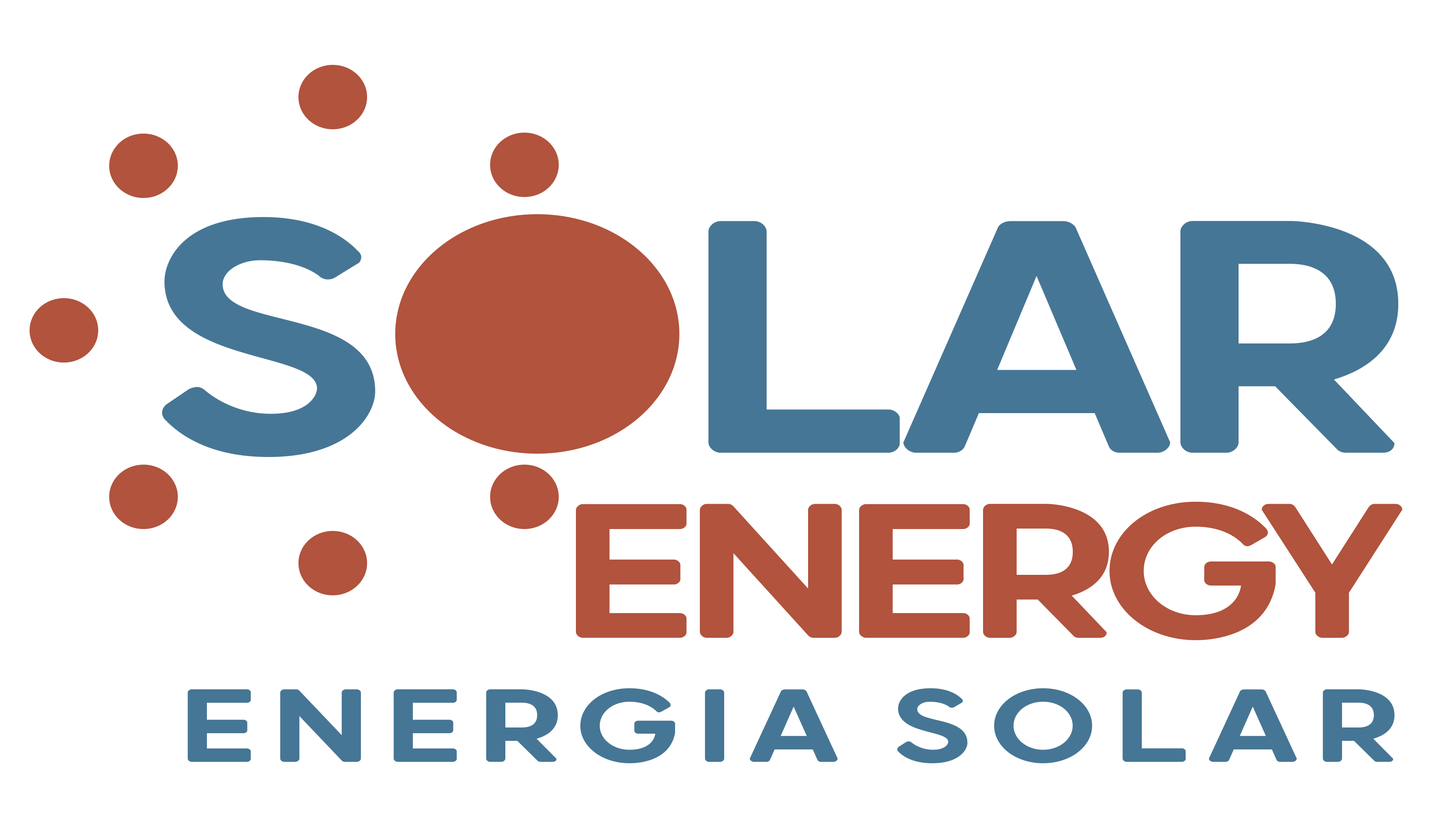
<style>
.page{position:relative;width:1435px;height:831px;background:#ffffff}
.page>*{position:absolute;margin:0}
.t1{font:399.9px "GroldRounded-Medium";letter-spacing:-0.06em;color:#467695;scale:1.2 1}
.t2{font:231.2px "GroldRounded-Medium";letter-spacing:-0.06em;color:#b1533d;scale:1.2 1}
.t3{font:125.1px "GroldRounded-Medium";letter-spacing:0.08em;color:#467695;scale:1.27 1}
</style>
<div class="page">
<p class="t1" style="left:162px;top:217px;width:213px;height:240px">S</p>
<p class="t1" style="left:709px;top:221px;width:690px;height:232px">LAR</p>
<p class="t2" style="left:576px;top:501px;width:827px;height:139px">ENERGY</p>
<p class="t3" style="left:187px;top:688px;width:1208px;height:75px">ENERGIA SOLAR</p>
</div>
